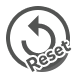
<style>
.page{position:relative;width:76px;height:76px;background:#ffffff}
.page>*{position:absolute;margin:0}
.t1{font:18.8px "MikadoMedium";color:#535453}
</style>
<div class="page">
<p class="t1" style="left:26px;top:40px;width:46px;height:32px;rotate:-30deg">Reset</p>
</div>
